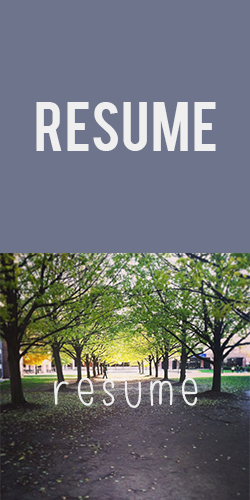
<style>
.page{position:relative;width:250px;height:500px;background:#6d748b}
.page>*{position:absolute;margin:0}
.t1{font:55px "Bebas";color:#efefef}
.t2{font:55px "ElsieTallnSkinny";color:#efefef}
</style>
<div class="page">
<p class="t1" style="left:36px;top:102px;width:180px;height:49px">resume</p>
<p class="t2" style="left:54px;top:377px;width:144px;height:31px">resume</p>
</div>
